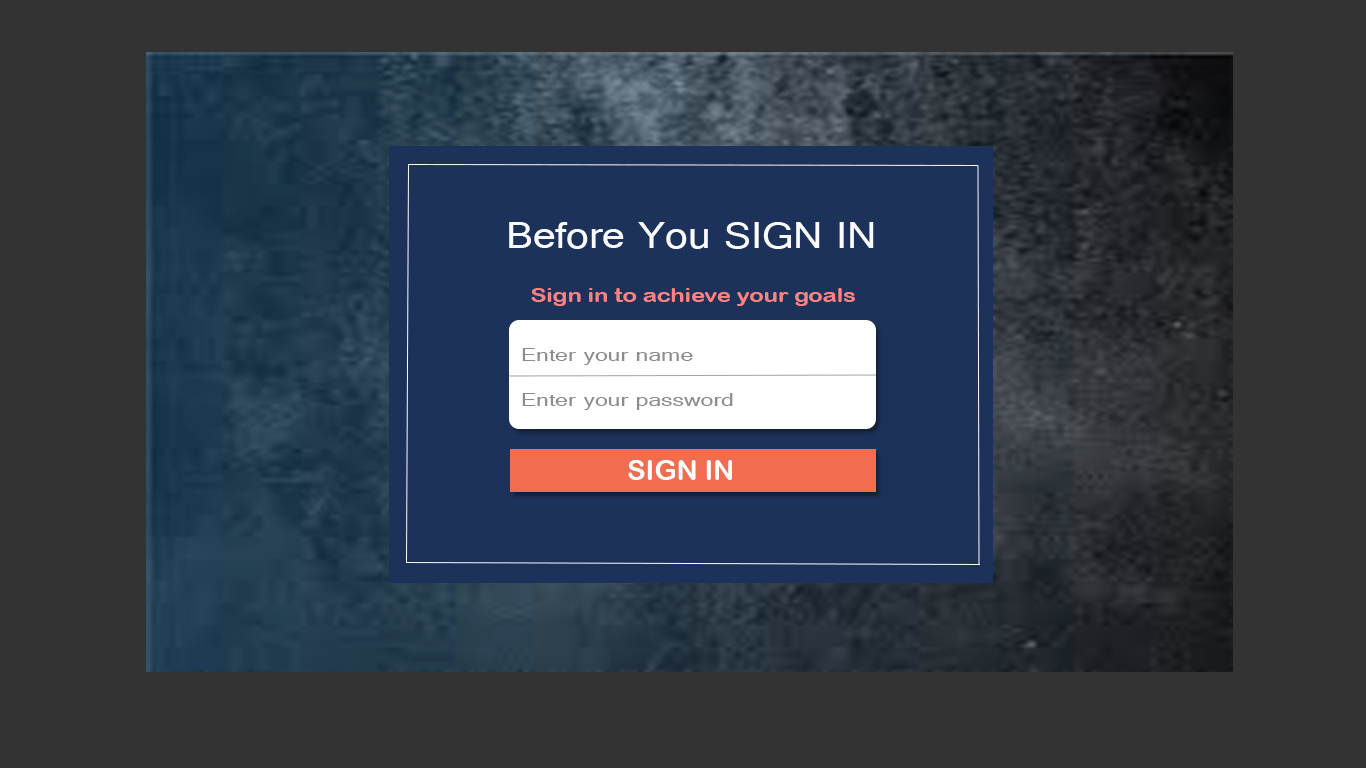
<style>
.page{position:relative;width:1366px;height:768px;background:#333333}
.page>*{position:absolute;margin:0}
.t1{font:38.7px "Gautami";color:#fafbfe;scale:1.13 1}
.t2{font:19.6px "ArialRoundedMTBold";color:#fd8383;scale:1.21 1}
.t3{font:19.5px "Gautami";color:#8b8c8c;scale:1.27 1}
.t4{font:27.7px "ArialRoundedMTBold";color:#fdfcfc}
</style>
<div class="page">
<p class="t1" style="left:509px;top:222px;width:365px;height:27px">Before You SIGN IN</p>
<p class="t2" style="left:531px;top:288px;width:324px;height:18px">Sign in to achieve your goals</p>
<p class="t3" style="left:522px;top:348px;width:171px;height:17px">Enter your name</p>
<p class="t3" style="left:522px;top:393px;width:211px;height:17px">Enter your password</p>
<p class="t4" style="left:628px;top:460px;width:104px;height:20px">SIGN IN</p>
</div>
